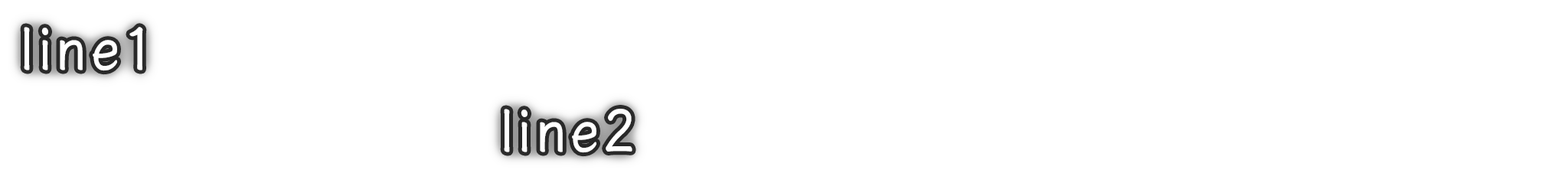
<style>
.page{position:relative;width:1568px;height:196px;background:#ffffff}
.page>*{position:absolute;margin:0}
.t1{font:58.2px "LXGWZhenKaiGB";letter-spacing:0.08em;color:#ffffff;scale:0.9 1}
</style>
<div class="page">
<p class="t1" style="left:24px;top:27px;width:119px;height:44px">line1</p>
<p class="t1" style="left:504px;top:109px;width:128px;height:44px">line2</p>
</div>
